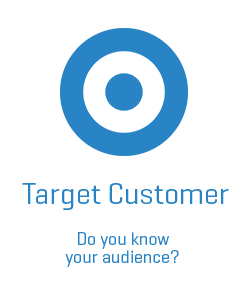
<style>
.page{position:relative;width:250px;height:300px;background:#ffffff}
.page>*{position:absolute;margin:0}
.t1{font:30px "Geogrotesque-Regular";color:#2884c5}
.t2{font:18px/18px "Geogrotesque-Regular";color:#2884c5}
</style>
<div class="page">
<p class="t1" style="left:22px;top:183px;width:207px;height:27px">Target Customer</p>
<p class="t2" style="left:65px;top:232px;width:114px;height:35px;text-align:center">Do you know your audience?</p>
</div>
